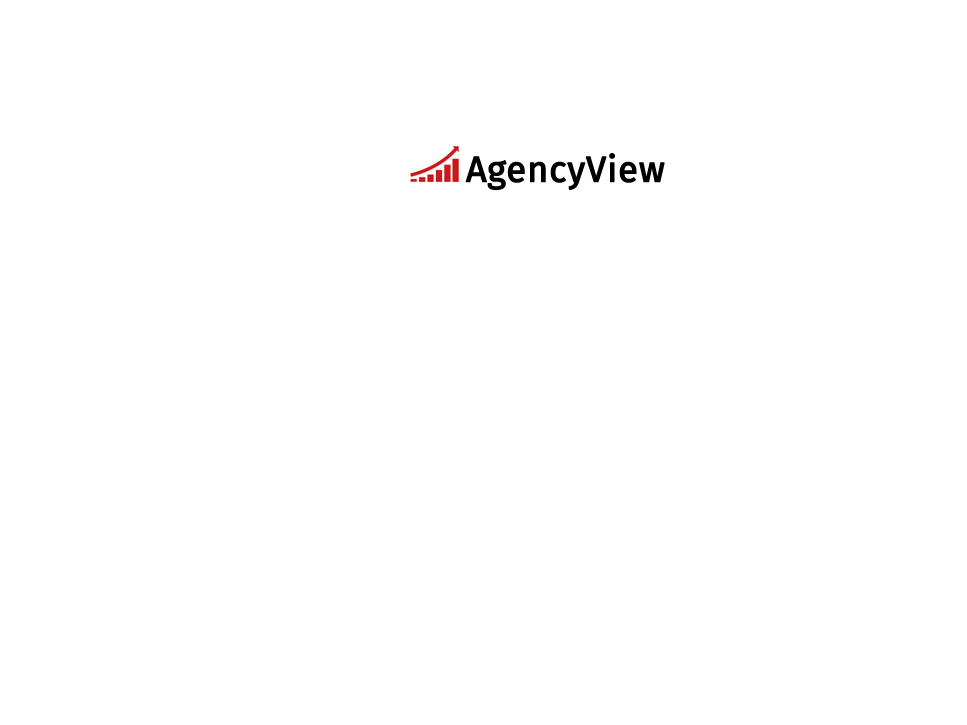
<style>
.page{position:relative;width:967px;height:725px;background:#ffffff}
.page>*{position:absolute;margin:0}
.t1{font:36px "FiraSans-Regular";color:#000000;font-weight:bold}
</style>
<div class="page">
<p class="t1" style="left:465px;top:153px;width:200px;height:37px">AgencyView</p>
</div>
